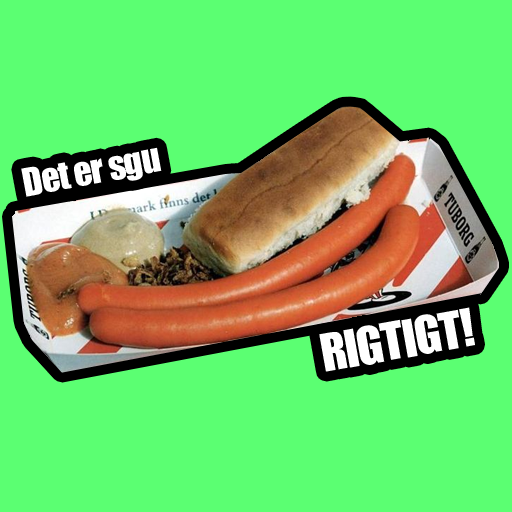
<style>
.page{position:relative;width:512px;height:512px;background:#5bff72}
.page>*{position:absolute;margin:0}
.t1{font:36px "Impact";letter-spacing:-0.025em;color:#ffffff}
.t2{font:48px "Impact";letter-spacing:-0.025em;color:#ffffff}
</style>
<div class="page">
<p class="t1" style="left:21px;top:147px;width:141px;height:50px;rotate:-11deg">Det er sgu</p>
<p class="t2" style="left:319px;top:307px;width:156px;height:65px;rotate:-10deg">RIGTIGT!</p>
</div>
